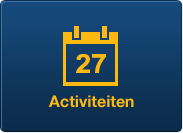
<style>
.page{position:relative;width:183px;height:133px}
.page>*{position:absolute;margin:0}
.t1{font:16px "HelveticaNeueLTStd-Bd";color:#fdb812}
</style>
<div class="page">
<p class="t1" style="left:48px;top:95px;width:86px;height:13px">Activiteiten</p>
</div>
